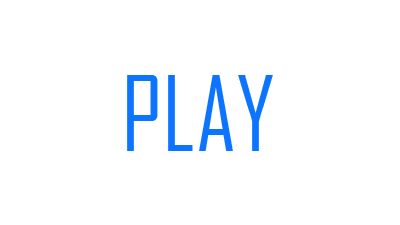
<style>
.page{position:relative;width:400px;height:225px;background:#ffffff}
.page>*{position:absolute;margin:0}
.t1{font:100px "AgencyFB-Reg";color:#0d74ff}
</style>
<div class="page">
<p class="t1" style="left:127px;top:75px;width:146px;height:76px">PLAY</p>
</div>
